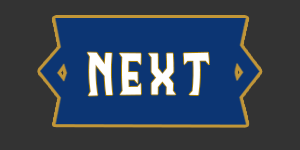
<style>
.page{position:relative;width:300px;height:150px;background:#333333}
.page>*{position:absolute;margin:0}
.t1{font:62.5px "Lorde-Havana";letter-spacing:0.1em;color:#ffffff;scale:0.75 1}
</style>
<div class="page">
<p class="t1" style="left:87px;top:52px;width:123px;height:44px">NEXT</p>
</div>
